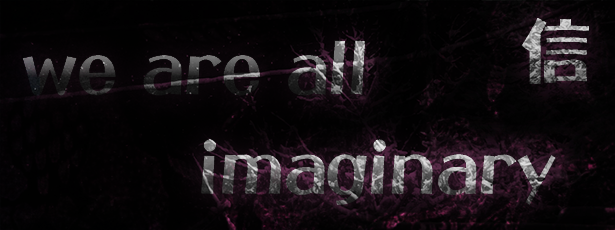
<style>
.page{position:relative;width:615px;height:230px}
.page>*{position:absolute;margin:0}
.t1{font:72px "DFPOPCorn-W12-WINP-RKSJ-H"}
</style>
<div class="page">
<p class="t1" style="left:521px;top:18px;width:68px;height:66px">信</p>
<p class="t1" style="left:22px;top:40px;width:343px;height:56px">we are all</p>
<p class="t1" style="left:201px;top:139px;width:355px;height:66px">imaginary</p>
</div>
